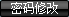
<style>
.page{position:relative;width:69px;height:17px}
.page>*{position:absolute;margin:0}
.t1{font:12px "NSimSun";color:#ffffff}
</style>
<div class="page">
<p class="t1" style="left:11px;top:2px;width:47px;height:12px">密码修改</p>
</div>
